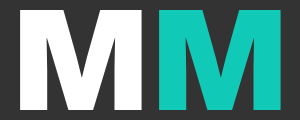
<style>
.page{position:relative;width:300px;height:120px;background:#333333}
.page>*{position:absolute;margin:0}
.t1{font:150px "WorkSans-ExtraBold";color:#ffffff}
.t2{font:150px "WorkSans-ExtraBold";color:#10cab7}
</style>
<div class="page">
<p class="t1" style="left:20px;top:10px;width:122px;height:100px">M</p>
<p class="t2" style="left:159px;top:10px;width:122px;height:100px">M</p>
</div>
